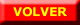
<style>
.page{position:relative;width:80px;height:25px;background:#ff0000}
.page>*{position:absolute;margin:0}
.t1{font:12px "Verdana-Bold";color:#ffff00}
</style>
<div class="page">
<p class="t1" style="left:13px;top:7px;width:54px;height:10px">VOLVER</p>
</div>
